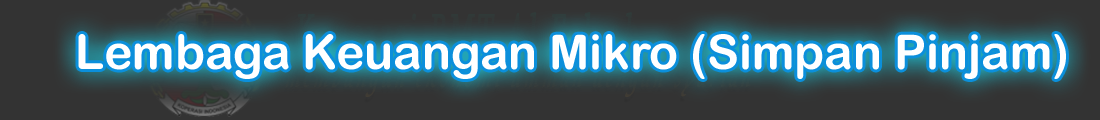
<style>
.page{position:relative;width:1100px;height:120px;background:#333333}
.page>*{position:absolute;margin:0}
.t1{font:48px "ArialRoundedMTBold";color:#ffffff}
</style>
<div class="page">
<p class="t1" style="left:78px;top:34px;width:988px;height:45px">Lembaga Keuangan Mikro (Simpan Pinjam)</p>
</div>
